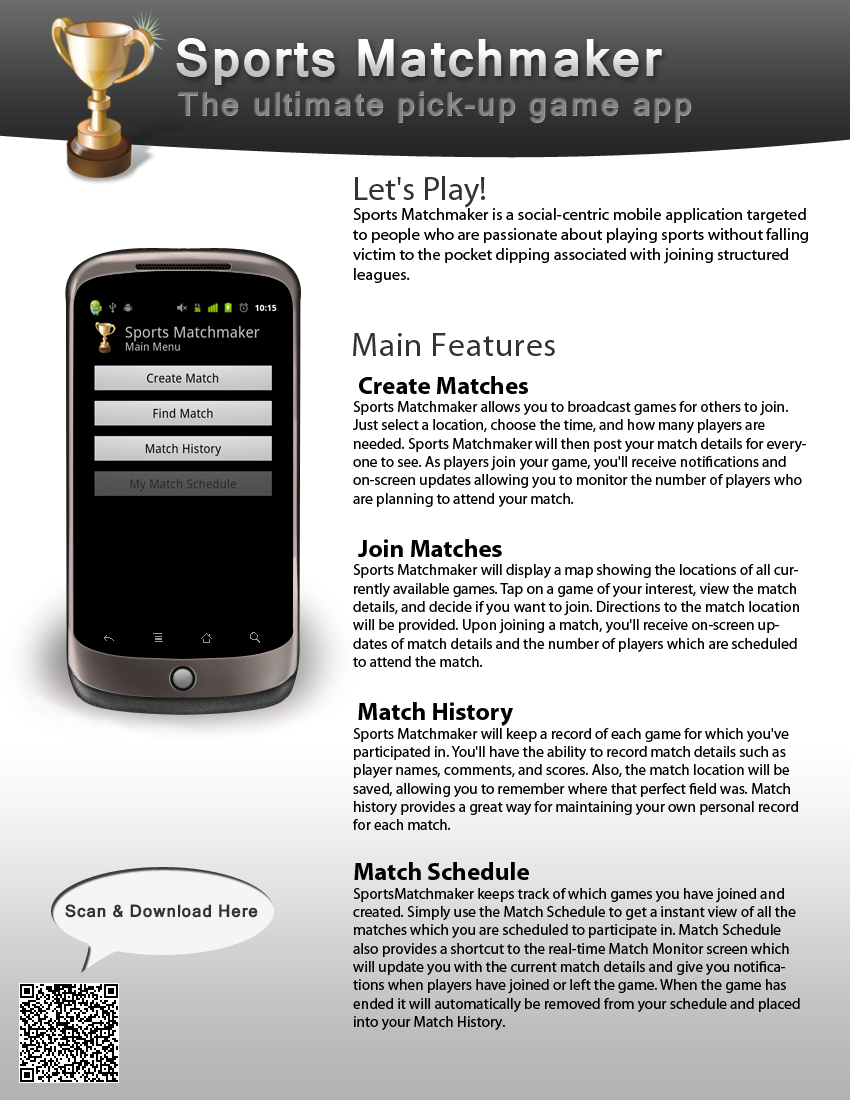
<style>
.page{position:relative;width:850px;height:1100px;background:#ffffff}
.page>*{position:absolute;margin:0}
.t1{font:50px "Kartika-Bold";letter-spacing:0.025em}
.t2{font:33.3px "Kartika-Bold";letter-spacing:0.025em;color:#797979}
.t3{font:33.3px "Kartika-Bold";letter-spacing:0.025em;color:#838383}
.t4{font:16.7px "MyriadPro-Regular";color:#000000}
.t5{font:33.3px "MyriadPro-Regular";color:#343333}
.t6{font:33.3px "MyriadPro-Regular";letter-spacing:0.025em;color:#343333}
.t7{font:15.3px "MyriadPro-Regular";color:#000000}
.t8{font:25px "MyriadPro-Bold";color:#000000}
.t9{font:16.7px "Kartika-Bold";letter-spacing:0.025em;color:#313233}
</style>
<div class="page">
<p class="t1" style="left:176px;top:38px;width:486px;height:47px">Sports Matchmaker</p>
<p class="t2" style="left:177px;top:90px;width:514px;height:32px">The ultimate pick-up game app</p>
<p class="t3" style="left:178px;top:91px;width:514px;height:32px">The ultimate pick-up game app</p>
<p class="t4" style="left:353px;top:176px;width:455px;height:107px"><span class="t5">Let's Play!<br></span>Sports Matchmaker is a social-centric mobile application targeted to people who are passionate about playing sports without falling victim to the pocket dipping associated with joining structured leagues.</p>
<p class="t6" style="left:353px;top:333px;width:202px;height:23px">Main Features</p>
<p class="t7" style="left:352px;top:376px;width:454px;height:654px"><span class="t8"> Create Matches<br></span>Sports Matchmaker allows you to broadcast games for others to join. Just select a location, choose the time, and how many players are needed. Sports Matchmaker will then post your match details for everyone to see. As players join your game, you'll receive notifications and on-screen updates allowing you to monitor the number of players who are planning to attend your match.<br><br><span class="t8"> Join Matches<br></span>Sports Matchmaker will display a map showing the locations of all currently available games. Tap on a game of your interest, view the match details, and decide if you want to join. Directions to the match location will be provided. Upon joining a match, you'll receive on-screen updates of match details and the number of players which are scheduled to attend the match.<br><br> <span class="t8">Match History<br></span>Sports Matchmaker will keep a record of each game for which you've participated in. You'll have the ability to record match details such as player names, comments, and scores. Also, the match location will be saved, allowing you to remember where that perfect field was. Match history provides a great way for maintaining your own personal record for each match.<br><br><span class="t8">Match Schedule<br></span>SportsMatchmaker keeps track of which games you have joined and created. Simply use the Match Schedule to get a instant view of all the matches which you are scheduled to participate in. Match Schedule also provides a shortcut to the real-time Match Monitor screen which will update you with the current match details and give you notifications when players have joined or left the game. When the game has ended it will automatically be removed from your schedule and placed into your Match History.</p>
<p class="t9" style="left:65px;top:904px;width:193px;height:14px">Scan &amp; Download Here</p>
</div>
